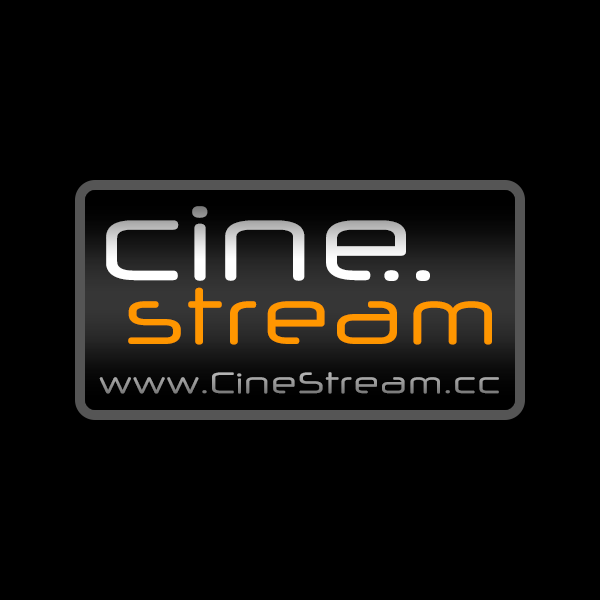
<style>
.page{position:relative;width:600px;height:600px;background:#000000}
.page>*{position:absolute;margin:0}
.t1{font:111.5px "NeuropolXFree"}
.t2{font:102px "NeuropolXFree";color:#ffffff}
.t3{font:79.9px "NeuropolXFree";color:#ff9600}
.t4{font:29.7px "NeuropolXFree";color:#949494}
</style>
<div class="page">
<p class="t1" style="left:106px;top:206px;width:300px;height:75px">cine</p>
<p class="t2" style="left:384px;top:270px;width:46px;height:11px">..</p>
<p class="t3" style="left:128px;top:287px;width:364px;height:58px">stream</p>
<p class="t4" style="left:99px;top:372px;width:400px;height:22px">www.CineStream.cc</p>
</div>
